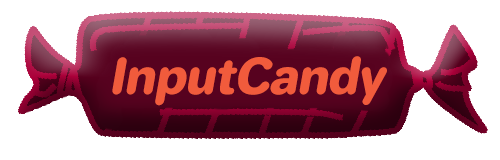
<style>
.page{position:relative;width:500px;height:160px;background:#ffffff}
.page>*{position:absolute;margin:0}
.t1{font:48px "Jellee-Roman";color:#f15b3c;font-style:italic}
</style>
<div class="page">
<p class="t1" style="left:112px;top:56px;width:275px;height:50px">InputCandy</p>
</div>
